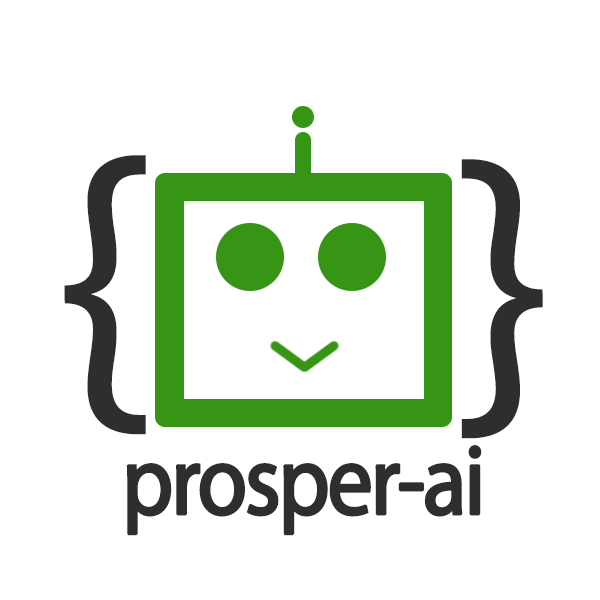
<style>
.page{position:relative;width:600px;height:600px;background:#ffffff}
.page>*{position:absolute;margin:0}
.t1{font:350px "MyriadPro-Regular";color:#2e2e2e}
.t2{font:100px "MyriadPro-Regular";letter-spacing:-0.05em;color:#2e2e2e;font-weight:bold;scale:0.9 1}
</style>
<div class="page">
<p class="t1" style="left:64px;top:155px;width:82px;height:280px">{</p>
<p class="t1" style="left:461px;top:159px;width:82px;height:280px">}</p>
<p class="t2" style="left:126px;top:445px;width:356px;height:91px">prosper-ai</p>
</div>
